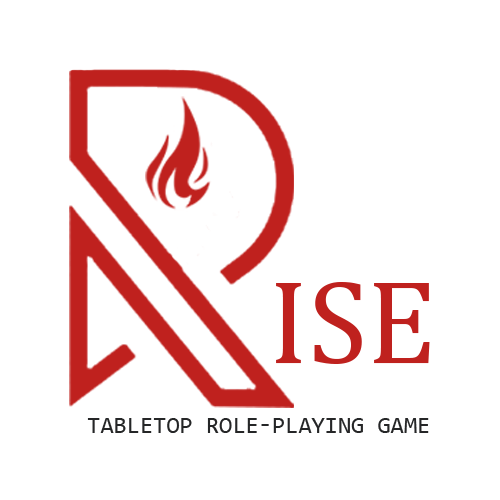
<style>
.page{position:relative;width:500px;height:500px;background:#ffffff}
.page>*{position:absolute;margin:0}
.t1{font:120px "Cambria";color:#bf211e;text-transform:uppercase}
.t2{font:24px "Consolas";color:#252627;text-transform:uppercase}
</style>
<div class="page">
<p class="t1" style="left:276px;top:282px;width:154px;height:82px">ise</p>
<p class="t2" style="left:87px;top:418px;width:342px;height:15px">tabletop role-playing game</p>
</div>
